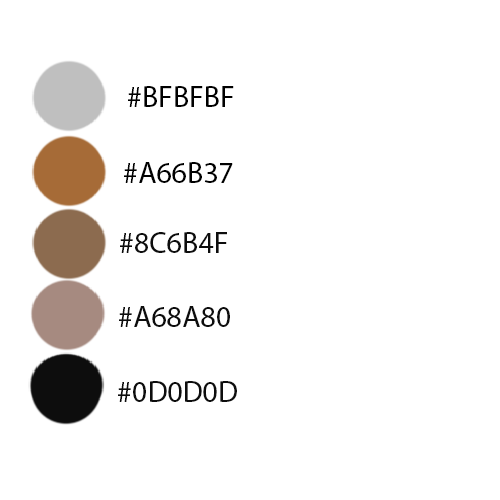
<style>
.page{position:relative;width:500px;height:500px;background:#ffffff}
.page>*{position:absolute;margin:0}
.t1{font:30px "MyriadPro-Regular";color:#000000}
.t2{font:30px "MyriadPro-Regular";color:#0d0d0d}
</style>
<div class="page">
<p class="t1" style="left:128px;top:86px;width:106px;height:21px">#BFBFBF</p>
<p class="t1" style="left:124px;top:162px;width:109px;height:21px">#A66B37</p>
<p class="t2" style="left:120px;top:232px;width:107px;height:21px">#8C6B4F</p>
<p class="t2" style="left:119px;top:306px;width:111px;height:21px">#A68A80</p>
<p class="t2" style="left:118px;top:381px;width:119px;height:21px">#0D0D0D</p>
</div>
